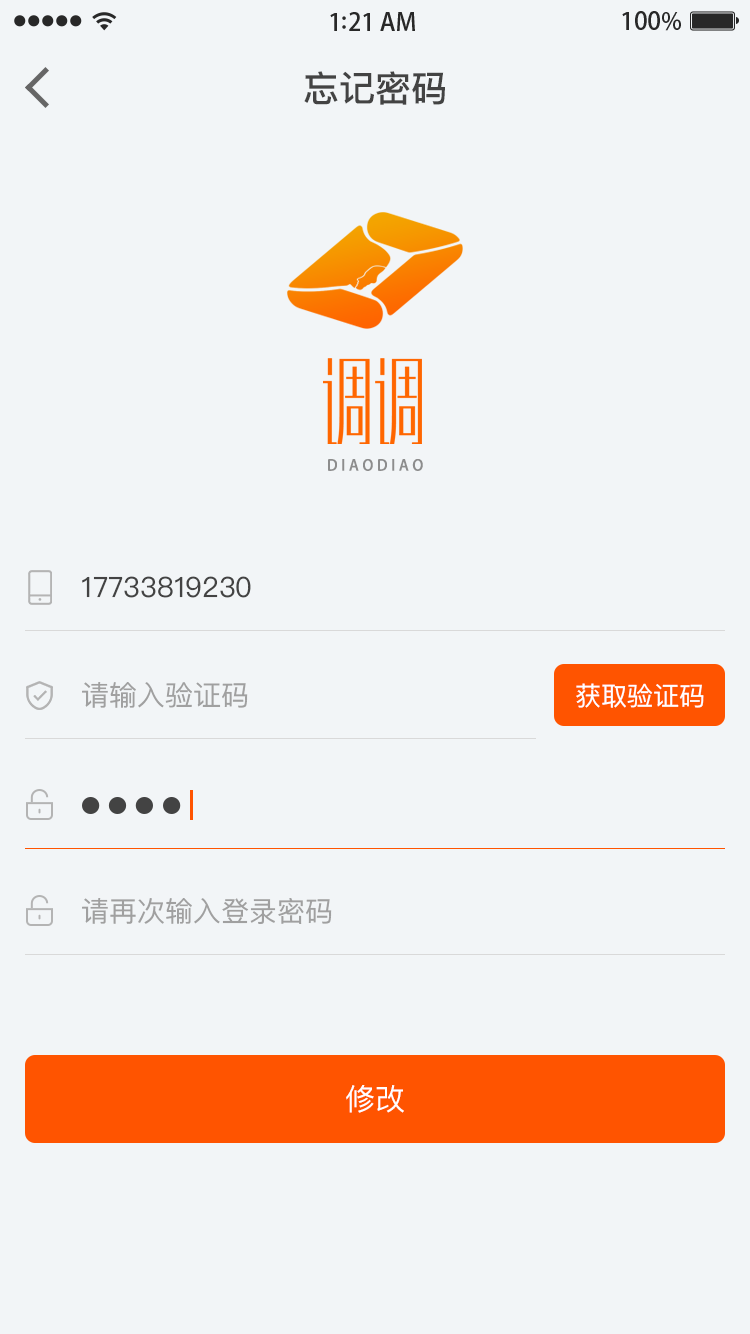
<style>
.page{position:relative;width:750px;height:1334px;background:#f2f5f7}
.page>*{position:absolute;margin:0}
.t1{font:36px "PingFangSC-Medium";color:#434343}
.t2{font:87.4px "MFXingHei_Noncommercial-Light";color:#fd7103;text-transform:uppercase}
.t3{font:15px "AdobeHeitiStd-Regular";letter-spacing:0.242em;color:#8d8d8d;text-transform:uppercase}
.t4{font:28px "PingFangSC-Regular";color:#434343}
.t5{font:28px "PingFangSC-Regular";color:#a0a0a0}
.t6{font:26px "PingFangSC-Regular";color:#ffffff}
.t7{font:30px "PingFangSC-Regular";color:#ffffff;text-transform:uppercase}
</style>
<div class="page">
<p class="t1" style="left:304px;top:71px;width:141px;height:34px">忘记密码</p>
<p class="t2" style="left:323px;top:358px;width:99px;height:86px">调调</p>
<p class="t3" style="left:328px;top:459px;width:95px;height:12px">diaodiao</p>
<p class="t4" style="left:82px;top:576px;width:169px;height:22px">17733819230</p>
<p class="t5" style="left:82px;top:682px;width:166px;height:26px">请输入验证码</p>
<p class="t6" style="left:576px;top:683px;width:128px;height:25px">获取验证码</p>
<p class="t5" style="left:82px;top:898px;width:250px;height:26px">请再次输入登录密码</p>
<p class="t7" style="left:346px;top:1085px;width:58px;height:28px">修改</p>
</div>
